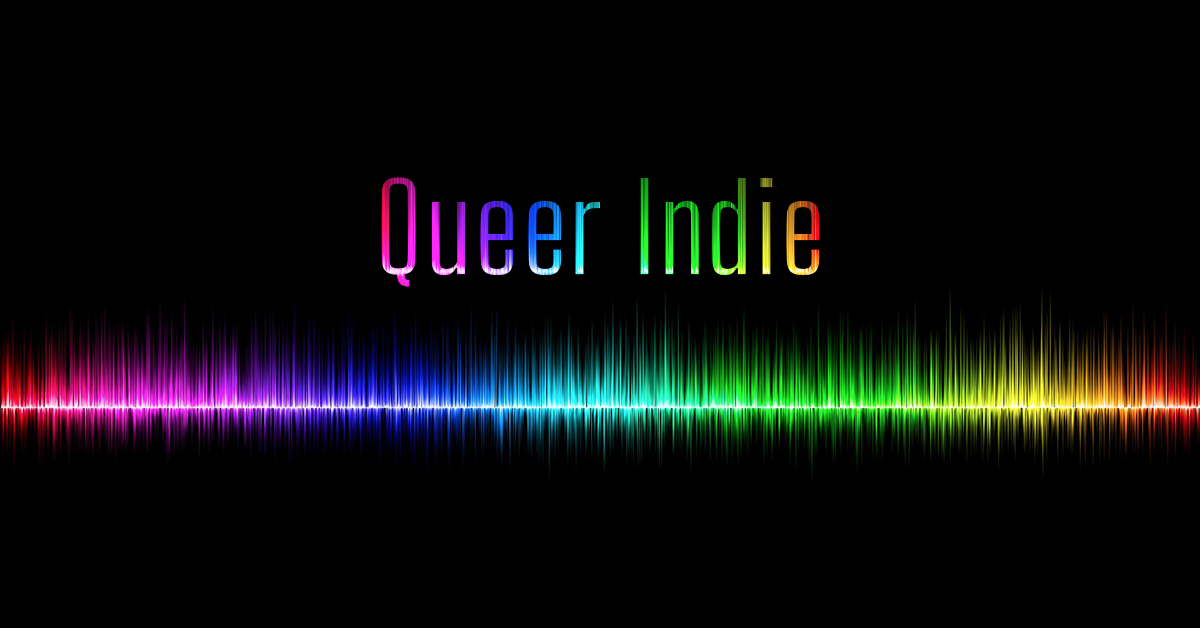
<style>
.page{position:relative;width:1200px;height:628px;background:#000000}
.page>*{position:absolute;margin:0}
.t1{font:120px "BigShouldersText-Light";letter-spacing:0.025em}
</style>
<div class="page">
<p class="t1" style="left:381px;top:177px;width:439px;height:110px">Queer Indie</p>
</div>
